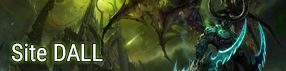
<style>
.page{position:relative;width:286px;height:71px}
.page>*{position:absolute;margin:0}
.t1{font:24px "RobotoCondensed-Regular";color:#ffffff}
</style>
<div class="page">
<p class="t1" style="left:11px;top:43px;width:92px;height:19px">Site DALL</p>
</div>
